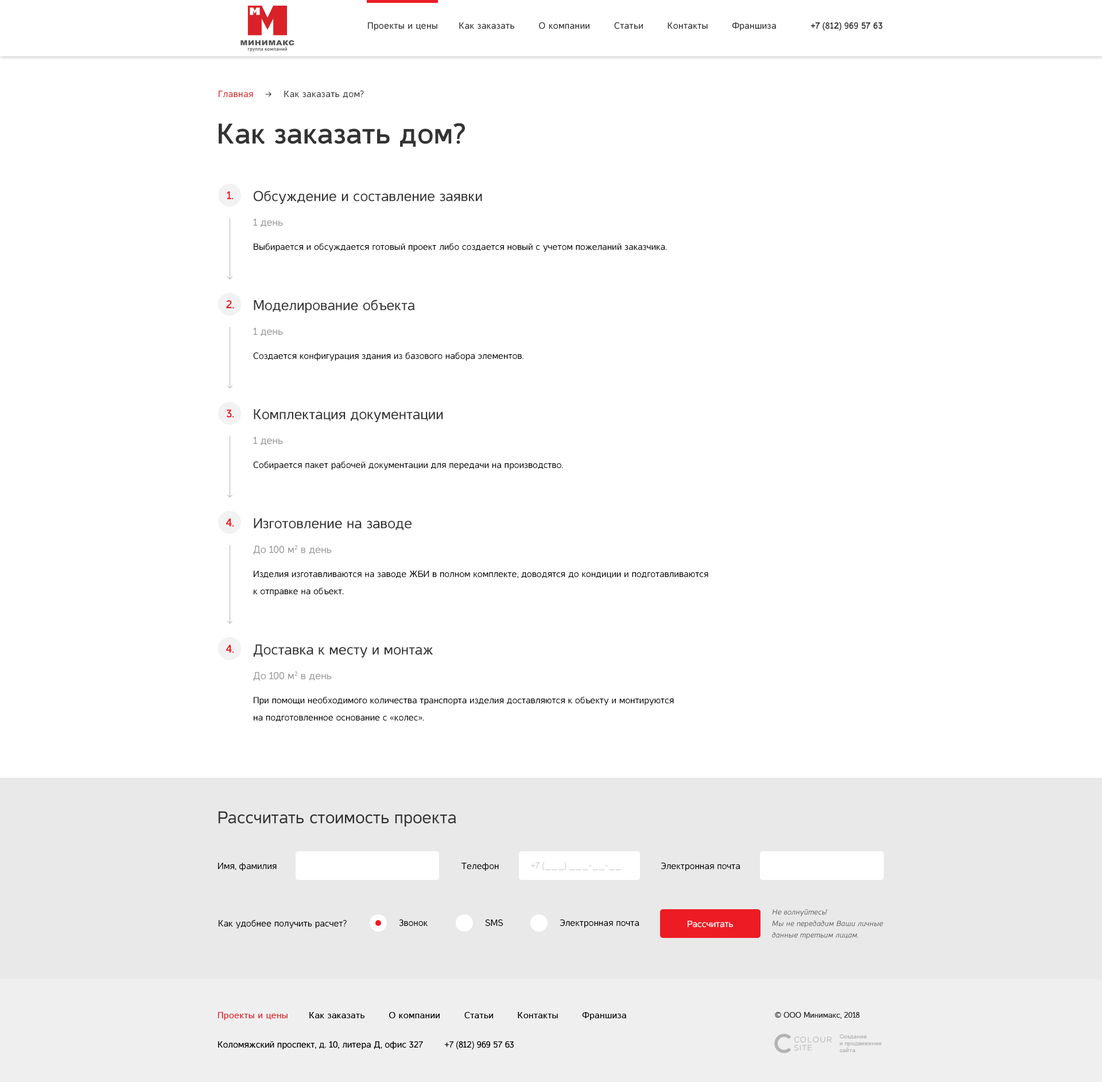
<style>
.page{position:relative;width:1102px;height:1082px;background:#ffffff}
.page>*{position:absolute;margin:0}
.t1{font:9.2px "Casper";letter-spacing:0.025em;color:#333333}
.t2{font:9.2px "Casper";letter-spacing:0.025em;color:#d92128}
.t3{font:28.7px "CasperBold";color:#333333}
.t4{font:11.5px "CasperBold";color:#ed1c24}
.t5{font:14.3px/24.7px "Casper";color:#333333}
.t6{font:10.3px/24.7px "Casper";color:#999999}
.t7{font:9.2px "Casper";color:#000000}
.t8{font:9.2px/17.2px "Casper";color:#000000}
.t9{font:17.2px "Casper";color:#333333}
.t10{font:9.2px "Casper";color:#cccccc}
.t11{font:7.5px/11.5px "CasperItalic";color:#666666}
.t12{font:9.2px "Casper";color:#ffffff}
</style>
<div class="page">
<p class="t1" style="left:219px;top:90px;width:145px;height:8px"><span class="t2">Главная</span>    →    Как заказать дом?</p>
<p class="t3" style="left:219px;top:123px;width:246px;height:24px">Как заказaть дом?</p>
<p class="t4" style="left:227px;top:191px;width:7px;height:9px">1.</p>
<p class="t5" style="left:253px;top:191px;width:229px;height:36px">Обсуждение и составление заявки<br><span class="t6">1 день</span></p>
<p class="t7" style="left:254px;top:243px;width:413px;height:9px">Выбирается и обсуждается готовый проект либо создается новый с учетом пожеланий заказчика.</p>
<p class="t4" style="left:226px;top:300px;width:8px;height:9px">2.</p>
<p class="t5" style="left:253px;top:300px;width:162px;height:36px">Моделирование объекта<br><span class="t6">1 день</span></p>
<p class="t7" style="left:253px;top:352px;width:270px;height:9px">Создается конфигурация здания из базового набора элементов.</p>
<p class="t4" style="left:226px;top:409px;width:8px;height:9px">3.</p>
<p class="t5" style="left:253px;top:409px;width:190px;height:36px">Комплектация документации<br><span class="t6">1 день</span></p>
<p class="t7" style="left:253px;top:461px;width:310px;height:9px">Собирается пакет рабочей документации для передачи на производство.</p>
<p class="t4" style="left:226px;top:518px;width:8px;height:9px">4.</p>
<p class="t5" style="left:253px;top:518px;width:159px;height:36px">Изготовление на заводе<br><span class="t6">До 100 м2 в день</span></p>
<p class="t8" style="left:254px;top:571px;width:454px;height:25px">Изделия изготавливаются на заводе ЖБИ в полном комплекте, доводятся до кондиции и подготавливаются к отправке на объект.</p>
<p class="t4" style="left:226px;top:645px;width:8px;height:8px">4.</p>
<p class="t5" style="left:253px;top:644px;width:180px;height:37px">Доставка к месту и монтаж<br><span class="t6">До 100 м2 в день</span></p>
<p class="t8" style="left:254px;top:696px;width:420px;height:26px">При помощи необходимого количества транспорта изделия доставляются к объекту и монтируются <br>на подготовленное основание с «колес».</p>
<p class="t9" style="left:218px;top:811px;width:238px;height:16px">Рассчитать стоимость проекта</p>
<p class="t7" style="left:218px;top:862px;width:59px;height:9px">Имя, фамилия</p>
<p class="t7" style="left:461px;top:862px;width:38px;height:9px">Телефон</p>
<p class="t10" style="left:531px;top:862px;width:90px;height:9px">+7 (___) ___-__-__</p>
<p class="t7" style="left:661px;top:862px;width:79px;height:9px">Электронная почта</p>
<p class="t11" style="left:772px;top:909px;width:111px;height:30px">Не волнуйтесь!<br>Мы не передадим Ваши личные данные третьим лицам.</p>
<p class="t7" style="left:219px;top:920px;width:128px;height:9px">Как удобнее получить расчет?</p>
<p class="t7" style="left:399px;top:919px;width:29px;height:7px">Звонок</p>
<p class="t7" style="left:485px;top:919px;width:18px;height:7px">SMS</p>
<p class="t7" style="left:560px;top:919px;width:79px;height:9px">Электронная почта</p>
<p class="t12" style="left:688px;top:921px;width:45px;height:7px">Рассчитать</p>
</div>
